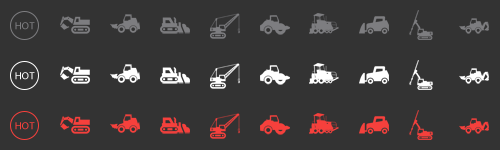
<style>
.page{position:relative;width:500px;height:150px;background:#333333}
.page>*{position:absolute;margin:0}
.t1{font:9.2px "MicrosoftYaHei";letter-spacing:0.005em;color:#7d7d80}
.t2{font:9.2px "MicrosoftYaHei";letter-spacing:0.005em;color:#ffffff}
.t3{font:9.2px "MicrosoftYaHei";letter-spacing:0.005em;color:#f6403c}
</style>
<div class="page">
<p class="t1" style="left:15px;top:22px;width:20px;height:8px">HOT</p>
<p class="t2" style="left:15px;top:72px;width:20px;height:8px">HOT</p>
<p class="t3" style="left:15px;top:122px;width:20px;height:8px">HOT</p>
</div>
